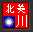
<style>
.page{position:relative;width:33px;height:32px;background:#f20000}
.page>*{position:absolute;margin:0}
.t1{font:10.4px "SimSun";color:#ffffff}
.t2{font:11.7px "SimSun";color:#ffffff}
</style>
<div class="page">
<p class="t1" style="left:6px;top:4px;width:19px;height:9px">北美</p>
<p class="t2" style="left:16px;top:15px;width:11px;height:12px">川</p>
</div>
